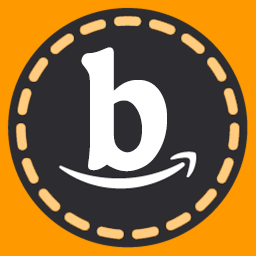
<style>
.page{position:relative;width:256px;height:256px;background:#2d2d31}
.page>*{position:absolute;margin:0}
.t1{font:180px "KabarettD";letter-spacing:0.01em;color:#ffffff}
</style>
<div class="page">
<p class="t1" style="left:81px;top:47px;width:86px;height:125px">b</p>
</div>
